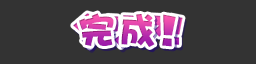
<style>
.page{position:relative;width:256px;height:64px;background:#333333}
.page>*{position:absolute;margin:0}
.t1{font:37.3px "DFPHaiBaoW12";letter-spacing:0.1em}
.t2{font:37.3px "MARIOFontv3_1-Solid";letter-spacing:0.1em}
</style>
<div class="page">
<p class="t1" style="left:79px;top:13px;width:97px;height:34px">完成<span class="t2">！</span></p>
</div>
